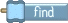
<style>
.page{position:relative;width:68px;height:23px;background:#ffffff}
.page>*{position:absolute;margin:0}
.t1{font:14px "36daysagoBRK";color:#efffff}
</style>
<div class="page">
<p class="t1" style="left:34px;top:5px;width:20px;height:13px">find</p>
</div>
